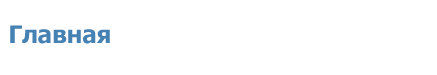
<style>
.page{position:relative;width:437px;height:75px;background:#ffffff}
.page>*{position:absolute;margin:0}
.t1{font:24px "Tahoma-Bold";color:#4682b4}
</style>
<div class="page">
<p class="t1" style="left:10px;top:25px;width:100px;height:19px">Главная</p>
</div>
